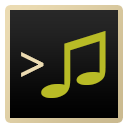
<style>
.page{position:relative;width:128px;height:128px}
.page>*{position:absolute;margin:0}
.t1{font:75.8px "LucidaConsole";color:#b8bb26;scale:1.54 1}
.t2{font:45.5px "SourceCodePro-Medium";color:#ebdbb2;scale:1.29 1}
</style>
<div class="page">
<p class="t1" style="left:41px;top:31px;width:65px;height:67px">♫</p>
<p class="t2" style="left:21px;top:52px;width:23px;height:25px">&gt;</p>
</div>
